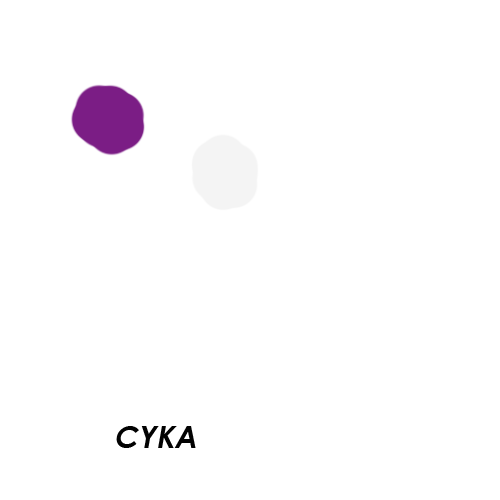
<style>
.page{position:relative;width:500px;height:500px;background:#ffffff}
.page>*{position:absolute;margin:0}
.t1{font:30px "CenturyGothic-Bold";color:#020202;font-style:italic}
</style>
<div class="page">
<p class="t1" style="left:116px;top:426px;width:80px;height:22px">CYKA</p>
</div>
